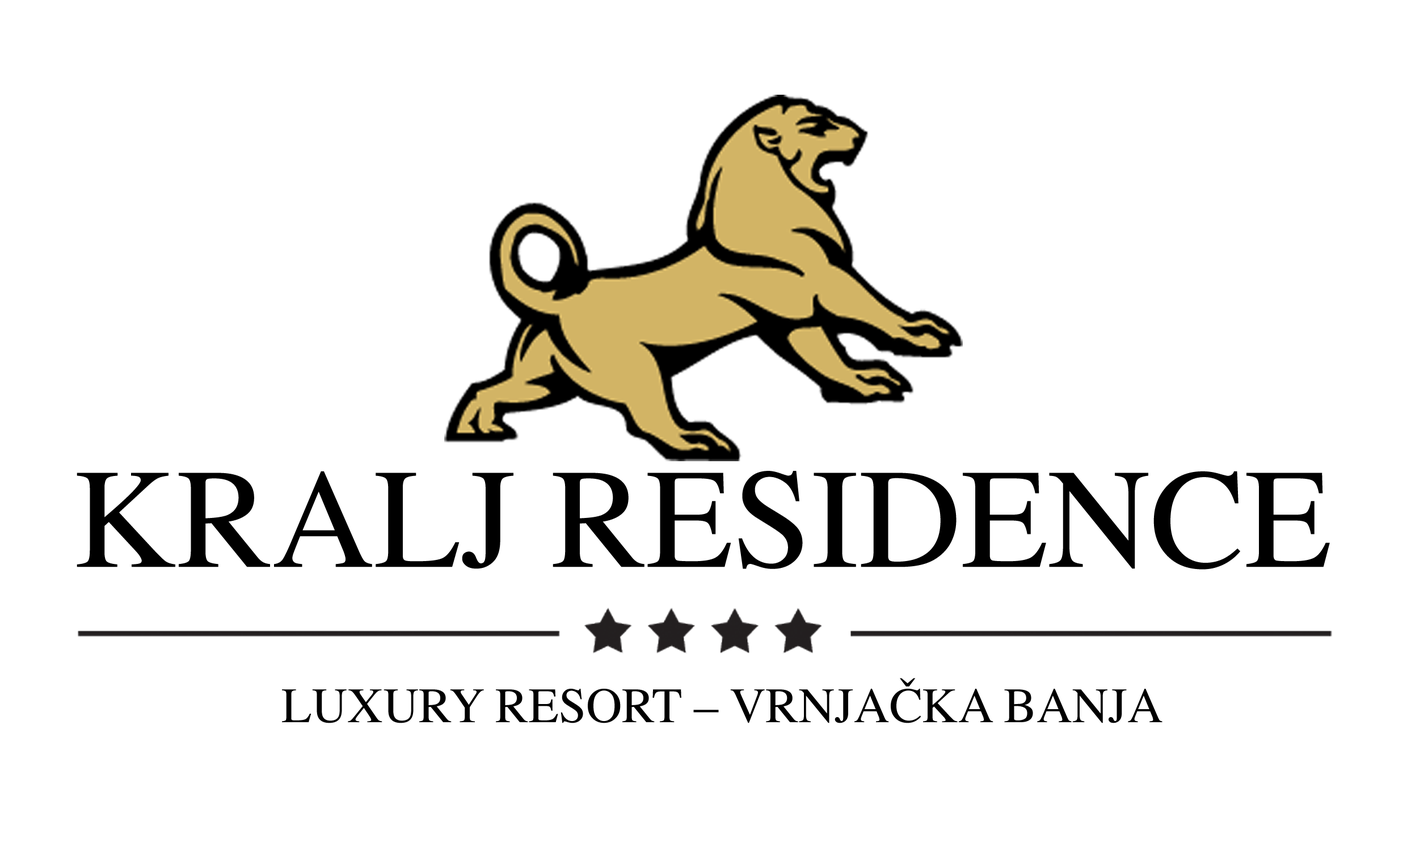
<style>
.page{position:relative;width:1407px;height:847px;background:#ffffff}
.page>*{position:absolute;margin:0}
.t1{font:141.9px "Times-Roman";color:#000000}
.t2{font:49.5px "Times-Roman";color:#000000}
</style>
<div class="page">
<p class="t1" style="left:77px;top:471px;width:1253px;height:99px">KRALJ RESIDENCE</p>
<p class="t2" style="left:282px;top:678px;width:881px;height:46px">LUXURY RESORT – VRNJAČKA BANJA</p>
</div>
